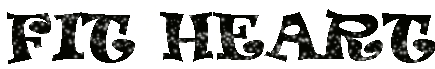
<style>
.page{position:relative;width:435px;height:69px;background:#ffffff}
.page>*{position:absolute;margin:0}
.t1{font:60px "Ravie";color:#040500}
</style>
<div class="page">
<p class="t1" style="left:7px;top:9px;width:429px;height:55px">FIT HEART</p>
</div>
